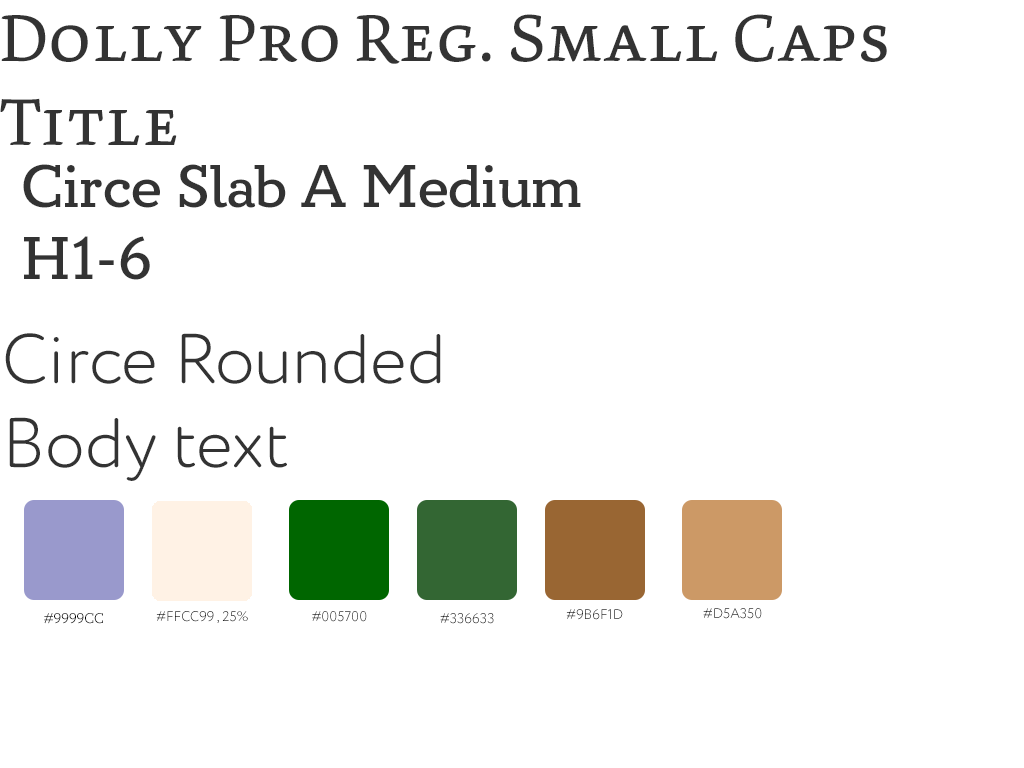
<style>
.page{position:relative;width:1024px;height:768px;background:#ffffff}
.page>*{position:absolute;margin:0}
.t1{font:70px "DollyPro-RegularSmallCaps";color:#333333}
.t2{font:60px "CirceSlabA-Medium";color:#333333}
.t3{font:70px "CirceRounded-Light";color:#333333}
.t4{font:14px "CirceSlabA-Light";color:#000000}
.t5{font:14px "CirceRounded-Light"}
</style>
<div class="page">
<p class="t1" style="left:0px;top:14px;width:887px;height:131px">Dolly Pro Reg. Small Caps<br>Title</p>
<p class="t2" style="left:23px;top:164px;width:558px;height:116px">Circe Slab A Medium<br>H1-6</p>
<p class="t3" style="left:5px;top:333px;width:436px;height:148px">Circe Rounded<br>Body text</p>
<p class="t4" style="left:44px;top:613px;width:59px;height:11px">#9999CC</p>
<p class="t5" style="left:156px;top:611px;width:92px;height:12px">#FFCC99 , 25%</p>
<p class="t5" style="left:312px;top:611px;width:55px;height:11px">#005700</p>
<p class="t5" style="left:440px;top:613px;width:54px;height:11px">#336633</p>
<p class="t5" style="left:566px;top:609px;width:57px;height:11px">#9B6F1D</p>
<p class="t5" style="left:703px;top:608px;width:59px;height:11px">#D5A350</p>
</div>
